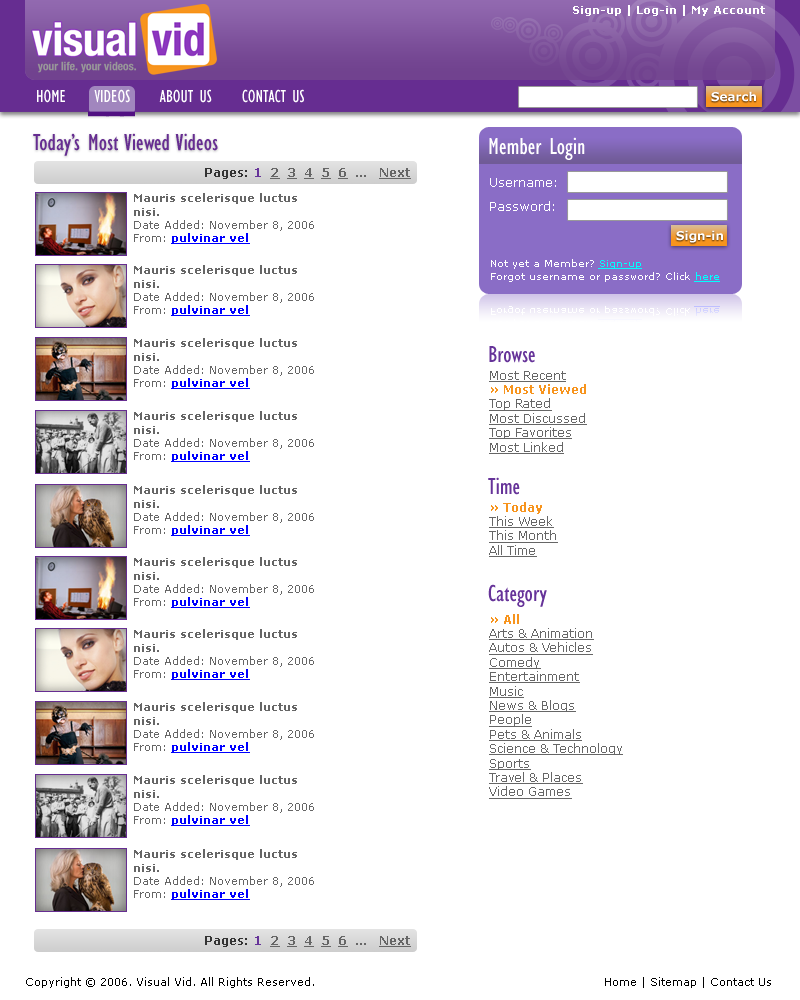
<style>
.page{position:relative;width:800px;height:1000px;background:#ffffff}
.page>*{position:absolute;margin:0}
.t1{font:11px "Verdana-Bold";color:#ffffff}
.t2{font:18px "GillSansMT-Condensed";color:#ffffff}
.t3{font:12px "Verdana-Bold";color:#ffffff}
.t4{font:24px "GillSansMT-Condensed";color:#662d91}
.t5{font:24px "GillSansMT-Condensed";color:#ffffff}
.t6{font:12px "Verdana-Bold";color:#666666;text-decoration:underline}
.t7{font:12px "Verdana-Bold";color:#333333}
.t8{font:12px "Verdana-Bold";color:#663399}
.t9{font:12px "Verdana-Bold";color:#666666}
.t10{font:12px/24px "Verdana";color:#ffffff}
.t11{font:11px "Verdana";color:#666666}
.t12{font:11px "Verdana-Bold";color:#666666}
.t13{font:11px "Verdana-Bold";color:#0000ff;text-decoration:underline}
.t14{font:10px "Verdana";color:#ffffff}
.t15{font:10px "Verdana";color:#00ffff;text-decoration:underline}
.t16{font:24px "GillSansMT-Condensed";color:#663399}
.t17{font:12px "Verdana";color:#666666;text-decoration:underline}
.t18{font:12px "Verdana-Bold";color:#f7941d}
.t19{font:11px "Verdana";color:#000000}
</style>
<div class="page">
<p class="t1" style="left:573px;top:5px;width:192px;height:11px">Sign-up | Log-in | My Account</p>
<p class="t2" style="left:37px;top:89px;width:267px;height:14px">HOME     VIDEOS     ABOUT US     CONTACT US</p>
<p class="t3" style="left:711px;top:91px;width:45px;height:11px">Search</p>
<p class="t4" style="left:33px;top:133px;width:185px;height:23px">Today’s Most Viewed Videos</p>
<p class="t5" style="left:489px;top:137px;width:96px;height:23px">Member Login</p>
<p class="t6" style="left:205px;top:168px;width:206px;height:11px"><span class="t7">Pages:</span><span class="t8"> 1  </span>2  3  4  5  6<span class="t9">  ...   </span>Next</p>
<p class="t10" style="left:490px;top:178px;width:66px;height:33px;text-align:justify">Username:<br>Password:</p>
<p class="t11" style="left:134px;top:193px;width:180px;height:51px"><span class="t12">Mauris scelerisque luctus nisi.<br></span>Date Added: November 8, 2006<br>From: <span class="t13">pulvinar vel</span></p>
<p class="t3" style="left:676px;top:230px;width:47px;height:13px">Sign-in</p>
<p class="t11" style="left:134px;top:265px;width:180px;height:51px"><span class="t12">Mauris scelerisque luctus nisi.<br></span>Date Added: November 8, 2006<br>From: <span class="t13">pulvinar vel</span></p>
<p class="t14" style="left:491px;top:259px;width:151px;height:10px">Not yet a Member? <span class="t15">Sign-up</span></p>
<p class="t14" style="left:491px;top:272px;width:229px;height:10px">Forgot username or password? Click <span class="t15">here</span></p>
<p class="t11" style="left:134px;top:338px;width:180px;height:51px"><span class="t12">Mauris scelerisque luctus nisi.<br></span>Date Added: November 8, 2006<br>From: <span class="t13">pulvinar vel</span></p>
<p class="t16" style="left:489px;top:346px;width:46px;height:17px">Browse</p>
<p class="t17" style="left:489px;top:371px;width:98px;height:83px">Most Recent<br><span class="t18">» Most Viewed<br></span>Top Rated<br>Most Discussed<br>Top Favorites<br>Most Linked</p>
<p class="t11" style="left:134px;top:411px;width:180px;height:51px"><span class="t12">Mauris scelerisque luctus nisi.<br></span>Date Added: November 8, 2006<br>From: <span class="t13">pulvinar vel</span></p>
<p class="t11" style="left:134px;top:485px;width:180px;height:51px"><span class="t12">Mauris scelerisque luctus nisi.<br></span>Date Added: November 8, 2006<br>From: <span class="t13">pulvinar vel</span></p>
<p class="t16" style="left:488px;top:477px;width:32px;height:18px">Time</p>
<p class="t17" style="left:489px;top:502px;width:69px;height:55px"><span class="t18">» Today<br></span>This Week<br>This Month<br>All Time</p>
<p class="t11" style="left:134px;top:557px;width:180px;height:51px"><span class="t12">Mauris scelerisque luctus nisi.<br></span>Date Added: November 8, 2006<br>From: <span class="t13">pulvinar vel</span></p>
<p class="t16" style="left:488px;top:584px;width:59px;height:23px">Category</p>
<p class="t17" style="left:489px;top:614px;width:134px;height:185px"><span class="t18">» All<br></span>Arts &amp; Animation<br>Autos &amp; Vehicles<br>Comedy<br>Entertainment<br>Music<br>News &amp; Blogs<br>People<br>Pets &amp; Animals<br>Science &amp; Technology<br>Sports<br>Travel &amp; Places<br>Video Games</p>
<p class="t11" style="left:134px;top:629px;width:180px;height:51px"><span class="t12">Mauris scelerisque luctus nisi.<br></span>Date Added: November 8, 2006<br>From: <span class="t13">pulvinar vel</span></p>
<p class="t11" style="left:134px;top:702px;width:180px;height:51px"><span class="t12">Mauris scelerisque luctus nisi.<br></span>Date Added: November 8, 2006<br>From: <span class="t13">pulvinar vel</span></p>
<p class="t11" style="left:134px;top:775px;width:180px;height:51px"><span class="t12">Mauris scelerisque luctus nisi.<br></span>Date Added: November 8, 2006<br>From: <span class="t13">pulvinar vel</span></p>
<p class="t11" style="left:134px;top:849px;width:180px;height:51px"><span class="t12">Mauris scelerisque luctus nisi.<br></span>Date Added: November 8, 2006<br>From: <span class="t13">pulvinar vel</span></p>
<p class="t6" style="left:205px;top:936px;width:206px;height:11px"><span class="t7">Pages:</span><span class="t8"> 1  </span>2  3  4  5  6<span class="t9">  ...   </span>Next</p>
<p class="t19" style="left:26px;top:977px;width:288px;height:11px">Copyright © 2006. Visual Vid. All Rights Reserved.</p>
<p class="t19" style="left:605px;top:977px;width:166px;height:11px">Home | Sitemap | Contact Us</p>
</div>
